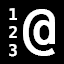
<style>
.page{position:relative;width:64px;height:64px;background:#000000}
.page>*{position:absolute;margin:0}
.t1{font:16px/18px "DejaVuSansMono-Bold";letter-spacing:0.6em;color:#ffffff}
.t2{font:56px "DejaVuSansMono-Bold";letter-spacing:0.6em;color:#ffffff}
</style>
<div class="page">
<p class="t1" style="left:9px;top:8px;width:8px;height:49px;text-align:right">1<br>2<br>3</p>
<p class="t2" style="left:23px;top:9px;width:32px;height:47px">@</p>
</div>
